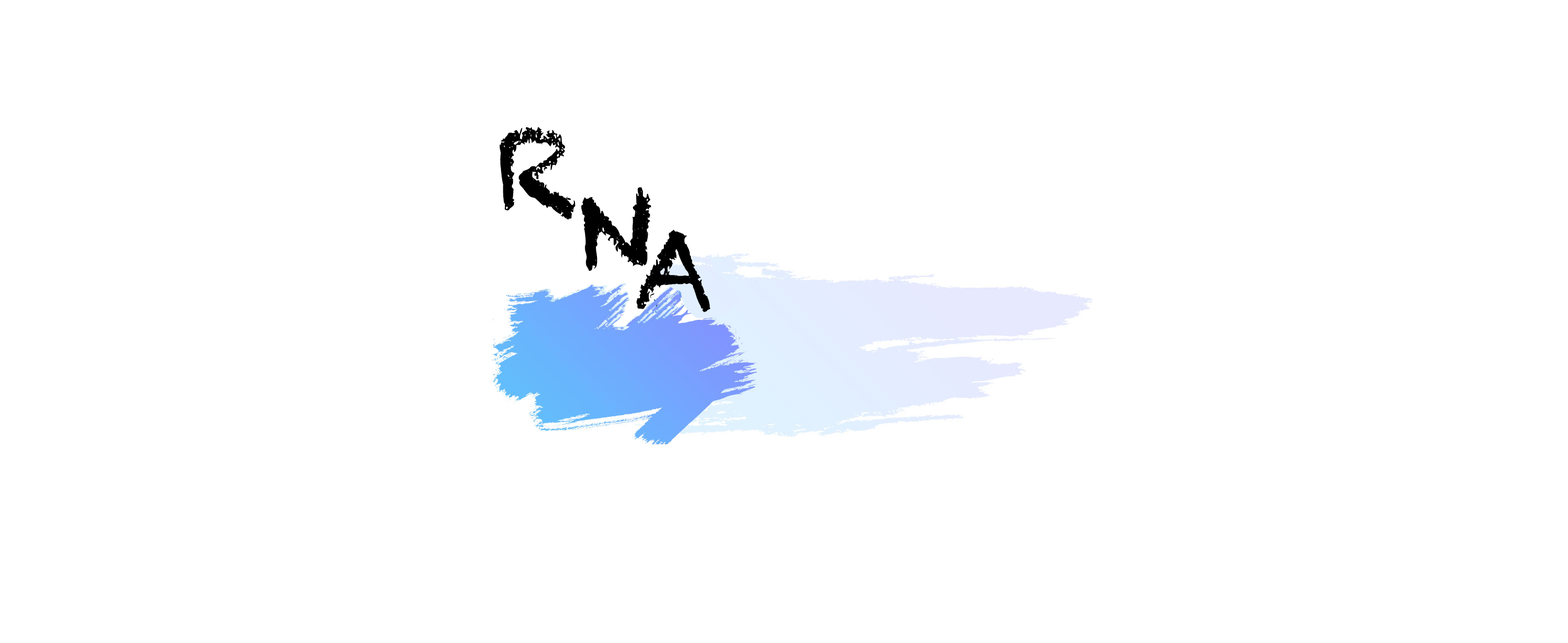
<style>
.page{position:relative;width:1568px;height:643px;background:#ffffff}
.page>*{position:absolute;margin:0}
.t1{font:107.8px "Chalkduster";color:#000000}
</style>
<div class="page">
<p class="t1" style="left:499px;top:127px;width:76px;height:93px">R</p>
<p class="t1" style="left:581px;top:187px;width:70px;height:84px">N</p>
<p class="t1" style="left:636px;top:230px;width:74px;height:83px">A</p>
</div>
